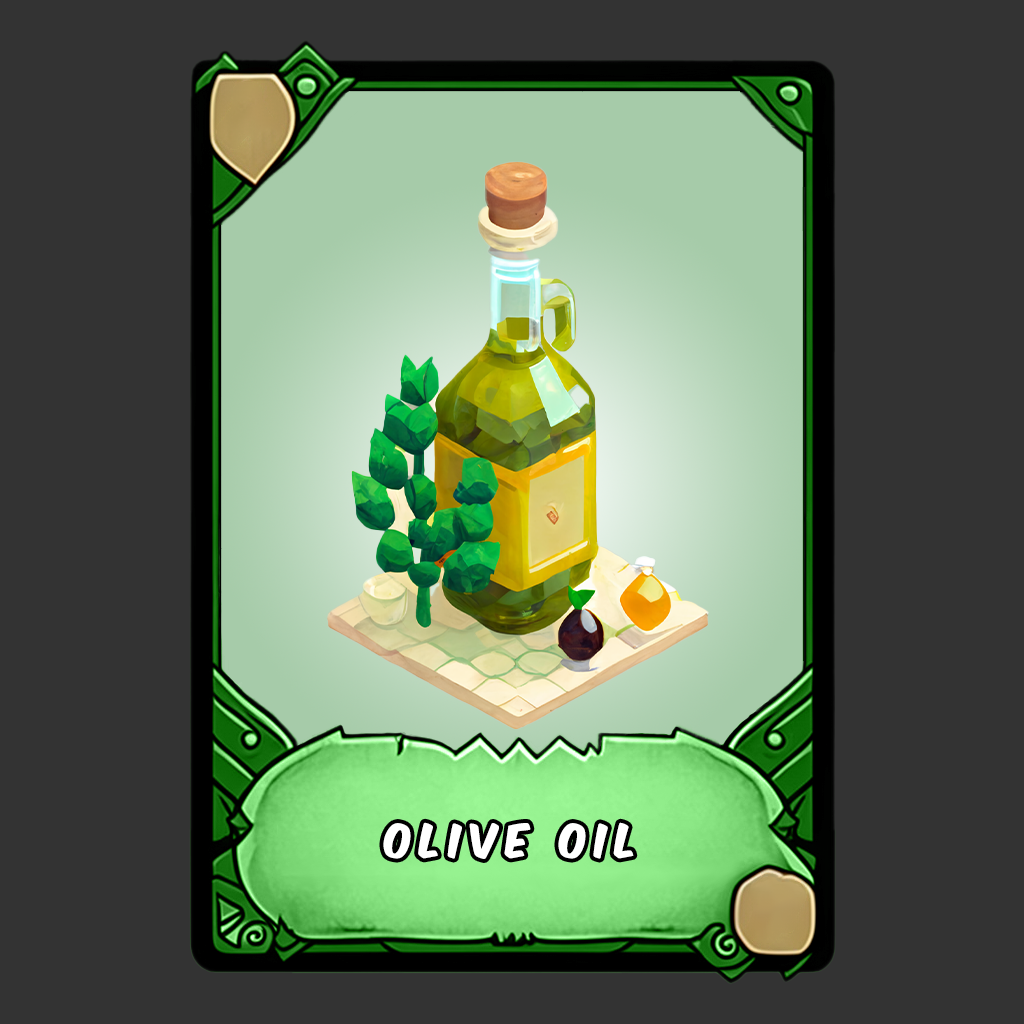
<style>
.page{position:relative;width:1024px;height:1024px;background:#333333}
.page>*{position:absolute;margin:0}
.t1{font:40px "KomikaAxis";letter-spacing:0.2em;color:#ffffff}
</style>
<div class="page">
<p class="t1" style="left:383px;top:822px;width:251px;height:37px">OLIVE OIL</p>
</div>
